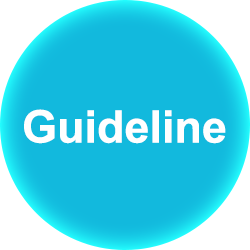
<style>
.page{position:relative;width:250px;height:250px;background:#12b9dd}
.page>*{position:absolute;margin:0}
.t1{font:45px "Arial-BoldMT";color:#ffffff}
</style>
<div class="page">
<p class="t1" style="left:24px;top:109px;width:202px;height:35px">Guideline</p>
</div>
